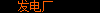
<style>
.page{position:relative;width:100px;height:13px;background:#000000}
.page>*{position:absolute;margin:0}
.t1{font:12px "SimSun";color:#ff5f00}
</style>
<div class="page">
<p class="t1" style="left:18px;top:0px;width:35px;height:12px">发电厂</p>
</div>
